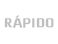
<style>
.page{position:relative;width:58px;height:44px;background:#ffffff}
.page>*{position:absolute;margin:0}
.t1{font:11.3px "AokaneStd-EB";letter-spacing:0.035em;color:#bfbfbf;font-weight:bold}
</style>
<div class="page">
<p class="t1" style="left:4px;top:15px;width:50px;height:13px">RÁPIDO</p>
</div>
